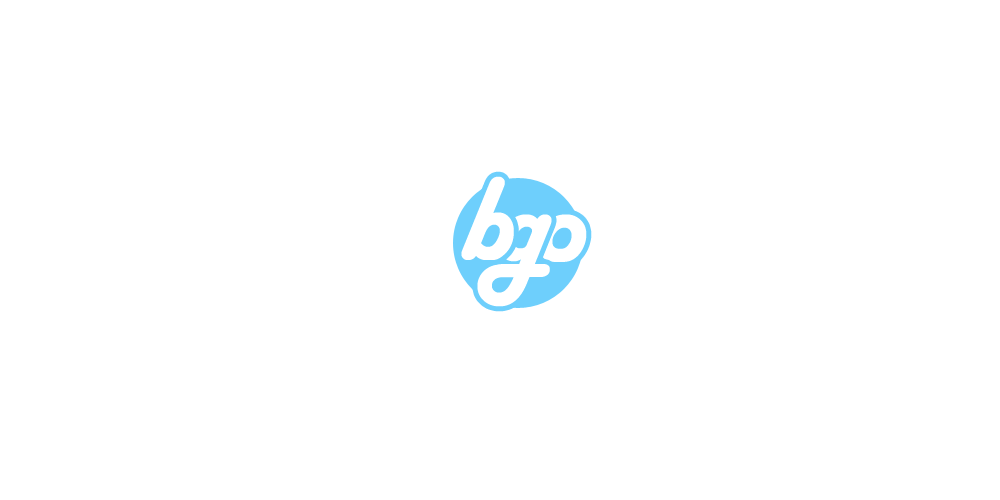
<style>
.page{position:relative;width:1000px;height:500px;background:#ffffff}
.page>*{position:absolute;margin:0}
.t1{font:125px "HarlowSolid";letter-spacing:-0.1em;color:#ffffff}
</style>
<div class="page">
<p class="t1" style="left:461px;top:176px;width:53px;height:84px">b</p>
<p class="t1" style="left:477px;top:214px;width:75px;height:93px">g</p>
<p class="t1" style="left:537px;top:214px;width:50px;height:48px">o</p>
</div>
